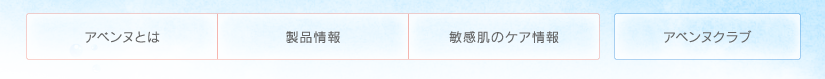
<style>
.page{position:relative;width:825px;height:79px}
.page>*{position:absolute;margin:0}
.t1{font:13px "RodinCID-M";letter-spacing:0.075em;color:#666666}
</style>
<div class="page">
<p class="t1" style="left:664px;top:30px;width:88px;height:13px">アベンヌクラブ</p>
<p class="t1" style="left:85px;top:31px;width:75px;height:12px">アベンヌとは</p>
<p class="t1" style="left:286px;top:31px;width:54px;height:12px">製品情報</p>
<p class="t1" style="left:449px;top:31px;width:110px;height:12px">敏感肌のケア情報</p>
</div>
